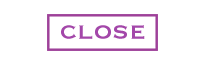
<style>
.page{position:relative;width:200px;height:70px;background:#ffffff}
.page>*{position:absolute;margin:0}
.t1{font:30.1px "Copperplate";color:#a347a9}
</style>
<div class="page">
<p class="t1" style="left:61px;top:25px;width:84px;height:14px">close</p>
</div>
